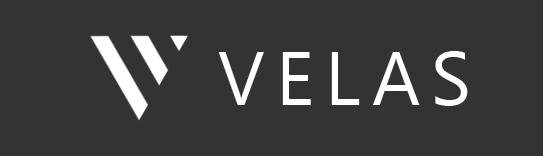
<style>
.page{position:relative;width:543px;height:156px;background:#333333}
.page>*{position:absolute;margin:0}
.t1{font:75px "SegoeUI";letter-spacing:0.15em;color:#ffffff}
</style>
<div class="page">
<p class="t1" style="left:218px;top:51px;width:250px;height:55px">VELAS</p>
</div>
